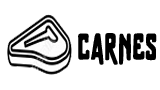
<style>
.page{position:relative;width:160px;height:90px;background:#ffffff}
.page>*{position:absolute;margin:0}
.t1{font:32.8px "BROTHER-Bold";letter-spacing:0.05em;color:#000000;scale:0.74 1}
</style>
<div class="page">
<p class="t1" style="left:78px;top:33px;width:79px;height:32px">CARNES</p>
</div>
